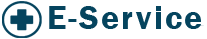
<style>
.page{position:relative;width:207px;height:39px;background:#ffffff}
.page>*{position:absolute;margin:0}
.t1{font:34.3px "FranklinGothic-Demi";letter-spacing:0.06em;color:#05445e}
</style>
<div class="page">
<p class="t1" style="left:49px;top:6px;width:152px;height:23px">E-Service</p>
</div>
